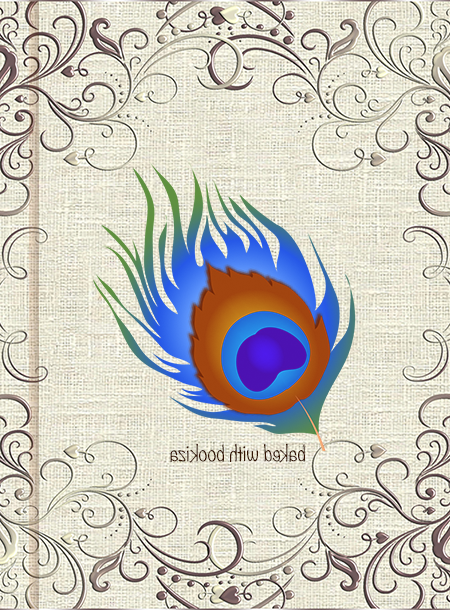
<style>
.page{position:relative;width:450px;height:610px}
.page>*{position:absolute;margin:0}
.t1{font:20.1px "Noteworthy-Light";color:#331403;scale:0.96 1}
</style>
<div class="page">
<p class="t1" style="left:170px;top:443px;width:135px;height:20px;rotate:180deg">baked with bookiza</p>
</div>
